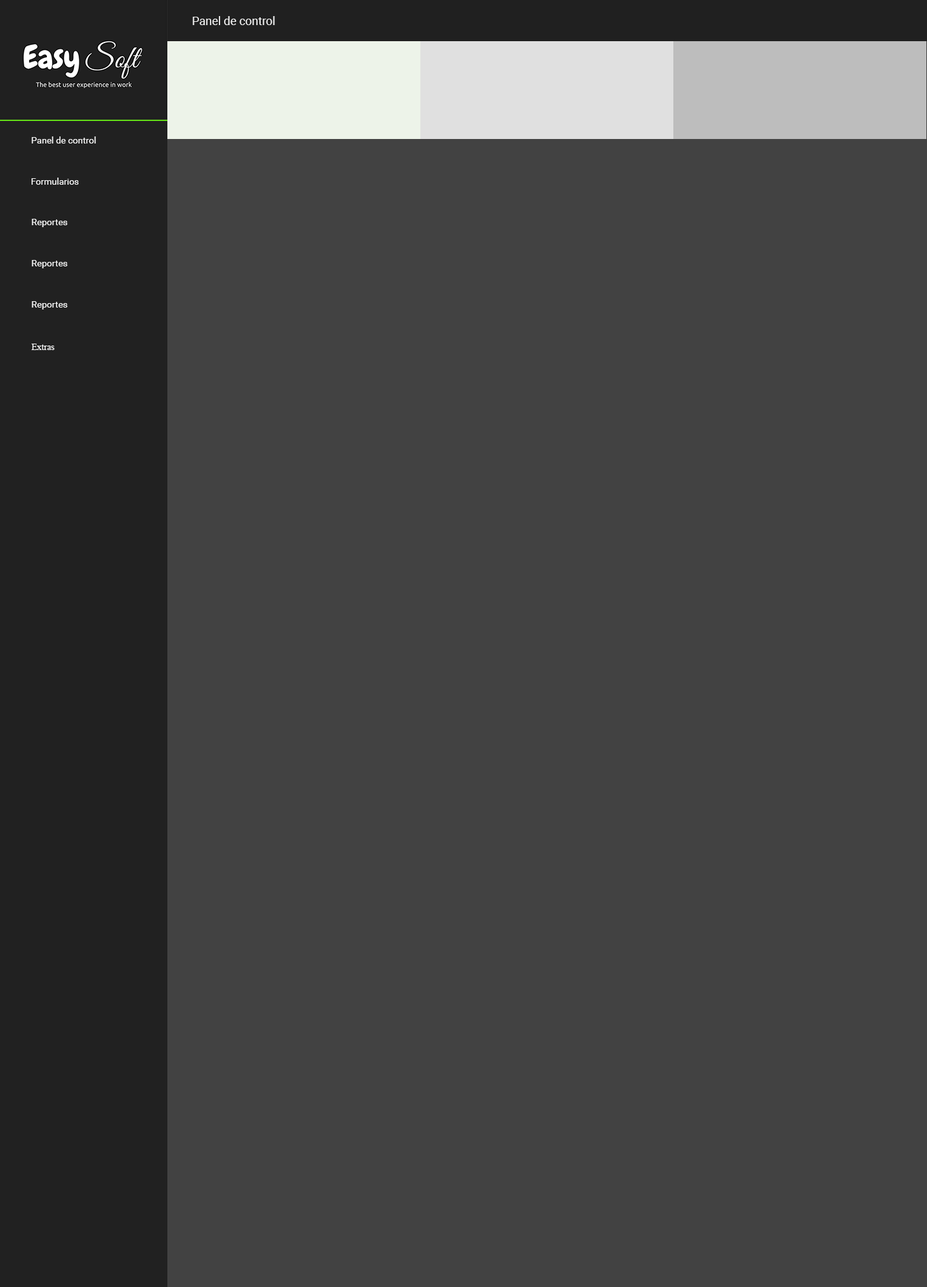
<style>
.page{position:relative;width:927px;height:1287px;background:#424242}
.page>*{position:absolute;margin:0}
.t1{font:11.6px "Roboto-Regular";color:#f5f5f5}
.t2{font:9px "Roboto-Regular";color:#f5f5f5}
.t3{font:9px "TimesNewRomanPSMT";color:#f5f5f5}
</style>
<div class="page">
<p class="t1" style="left:192px;top:16px;width:83px;height:9px">Panel de control</p>
<p class="t2" style="left:32px;top:136px;width:64px;height:7px">Panel de control</p>
<p class="t2" style="left:32px;top:178px;width:47px;height:7px">Formularios</p>
<p class="t2" style="left:32px;top:219px;width:36px;height:8px">Reportes</p>
<p class="t2" style="left:32px;top:260px;width:36px;height:8px">Reportes</p>
<p class="t2" style="left:32px;top:301px;width:36px;height:9px">Reportes</p>
<p class="t3" style="left:32px;top:344px;width:23px;height:6px">Extras</p>
</div>
